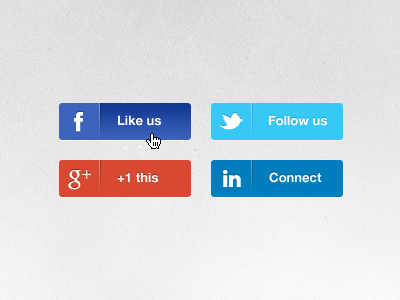
<style>
.page{position:relative;width:400px;height:300px}
.page>*{position:absolute;margin:0}
.t1{font:13px "HelveticaNeue-Bold";color:#ffffff}
</style>
<div class="page">
<p class="t1" style="left:118px;top:115px;width:43px;height:11px">Like us</p>
<p class="t1" style="left:269px;top:115px;width:58px;height:11px">Follow us</p>
<p class="t1" style="left:117px;top:172px;width:41px;height:11px">+1 this</p>
<p class="t1" style="left:269px;top:172px;width:53px;height:11px">Connect</p>
</div>
